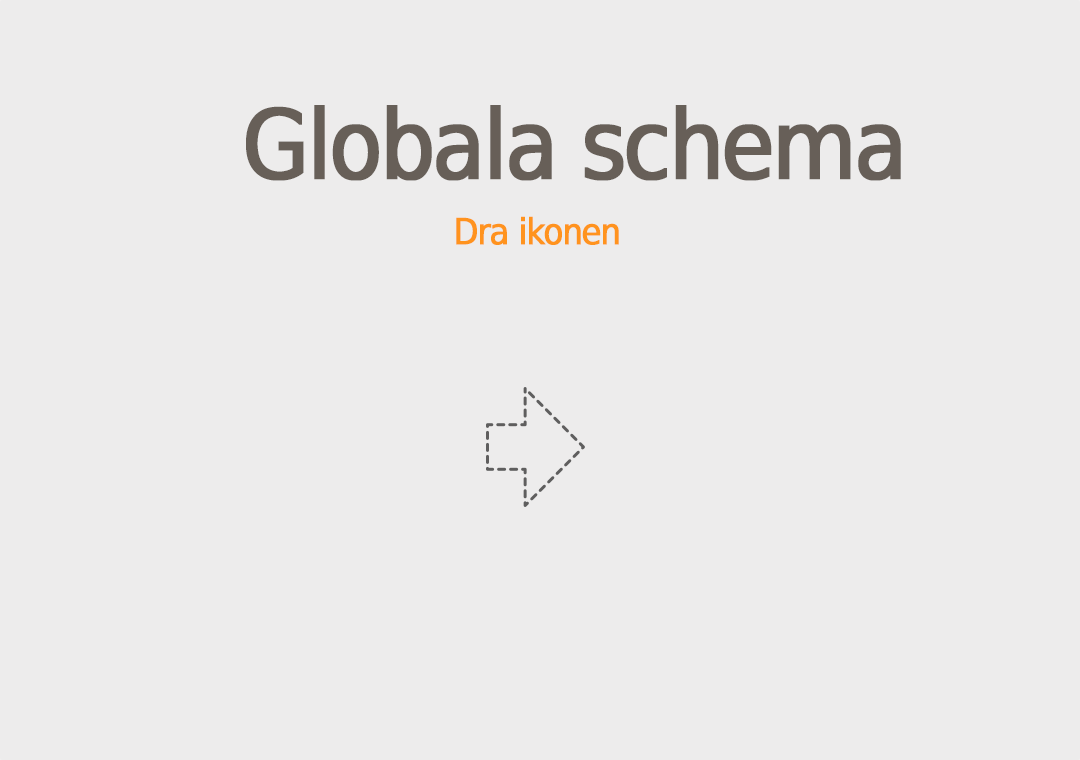
<style>
.page{position:relative;width:1080px;height:760px;background:#edecec}
.page>*{position:absolute;margin:0}
.t1{font:96px "DejaVuSansCondensed";letter-spacing:-0.05em;color:#675f58;font-weight:bold}
.t2{font:36px "DejaVuSansCondensed";letter-spacing:-0.05em;color:#ff931e;font-weight:bold}
</style>
<div class="page">
<p class="t1" style="left:246px;top:105px;width:655px;height:76px">Globala schema</p>
<p class="t2" style="left:456px;top:216px;width:163px;height:29px">Dra ikonen</p>
</div>
